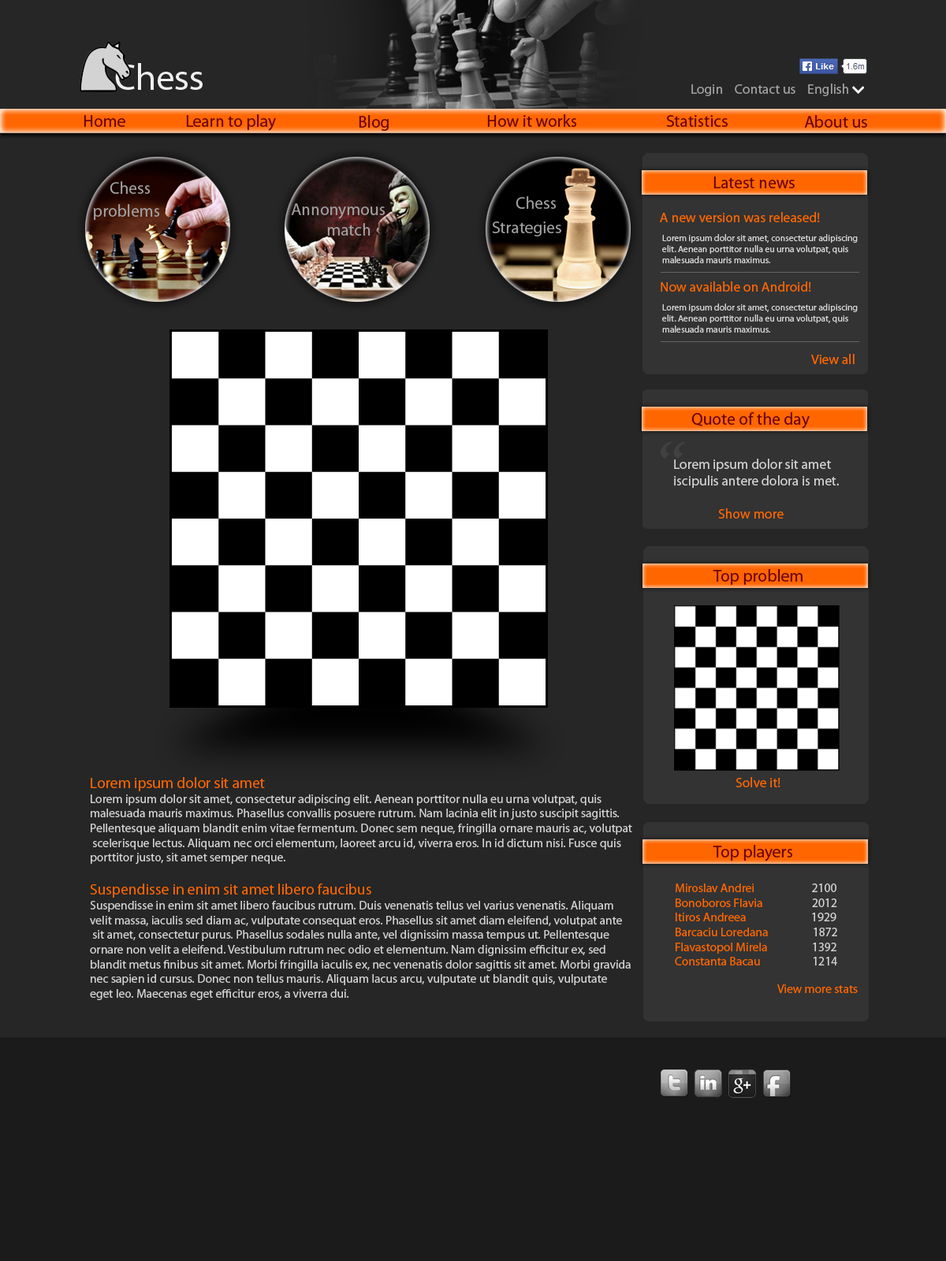
<style>
.page{position:relative;width:946px;height:1261px;background:#262626}
.page>*{position:absolute;margin:0}
.t1{font:36.8px "MyriadPro-Regular";color:#efefef}
.t2{font:13.8px "MyriadPro-Regular";color:#a2a2a2}
.t3{font:16.9px "MyriadPro-Regular";color:#69000a}
.t4{font:16.9px "MyriadPro-Regular";color:#a2a2a2}
.t5{font:13.8px "MyriadPro-Regular";color:#ff6600}
.t6{font:9.2px "MyriadPro-Regular";color:#d3d3d3}
.t7{font:55.2px "ScriptMTBold";color:#414141}
.t8{font:13.8px "MyriadPro-Regular";color:#d3d3d3}
.t9{font:12.3px "MyriadPro-Regular";color:#d3d3d3}
.t10{font:15.3px "MyriadPro-Regular";color:#ff6600}
.t11{font:12.3px "MyriadPro-Regular";color:#ff6600}
</style>
<div class="page">
<p class="t1" style="left:115px;top:63px;width:88px;height:27px">Chess</p>
<p class="t2" style="left:691px;top:84px;width:157px;height:12px">Login    Contact us    English</p>
<p class="t3" style="left:84px;top:115px;width:41px;height:12px">Home</p>
<p class="t3" style="left:186px;top:114px;width:90px;height:17px">Learn to play</p>
<p class="t3" style="left:359px;top:115px;width:30px;height:16px">Blog</p>
<p class="t3" style="left:487px;top:114px;width:90px;height:13px">How it works</p>
<p class="t3" style="left:666px;top:115px;width:61px;height:12px">Statistics</p>
<p class="t3" style="left:804px;top:115px;width:63px;height:13px">About us</p>
<p class="t4" style="left:110px;top:181px;width:41px;height:13px">Chess</p>
<p class="t3" style="left:713px;top:177px;width:81px;height:11px">Latest news</p>
<p class="t4" style="left:515px;top:196px;width:41px;height:13px">Chess</p>
<p class="t4" style="left:93px;top:204px;width:67px;height:16px">problems</p>
<p class="t4" style="left:291px;top:203px;width:94px;height:33px">Annonymous <br>          match</p>
<p class="t4" style="left:492px;top:221px;width:69px;height:15px">Strategies</p>
<p class="t5" style="left:660px;top:212px;width:160px;height:10px">A new version was released!</p>
<p class="t6" style="left:662px;top:234px;width:195px;height:29px">Lorem ipsum dolor sit amet, consectetur adipiscing <br>elit. Aenean porttitor nulla eu urna volutpat, quis <br>malesuada mauris maximus.</p>
<p class="t5" style="left:660px;top:281px;width:151px;height:11px">Now available on Android!</p>
<p class="t6" style="left:662px;top:303px;width:195px;height:30px">Lorem ipsum dolor sit amet, consectetur adipiscing <br>elit. Aenean porttitor nulla eu urna volutpat, quis <br>malesuada mauris maximus.</p>
<p class="t5" style="left:811px;top:354px;width:43px;height:10px">View all</p>
<p class="t3" style="left:691px;top:412px;width:118px;height:17px">Quote of the day</p>
<p class="t7" style="left:660px;top:441px;width:25px;height:18px">“</p>
<p class="t8" style="left:674px;top:459px;width:165px;height:29px">Lorem ipsum dolor sit amet<br>iscipulis antere dolora is met.</p>
<p class="t5" style="left:718px;top:508px;width:65px;height:11px">Show more</p>
<p class="t3" style="left:712px;top:569px;width:90px;height:16px">Top problem</p>
<p class="t9" style="left:90px;top:777px;width:542px;height:223px"><span class="t10">Lorem ipsum dolor sit amet<br></span>Lorem ipsum dolor sit amet, consectetur adipiscing elit. Aenean porttitor nulla eu urna volutpat, quis <br>malesuada mauris maximus. Phasellus convallis posuere rutrum. Nam lacinia elit in justo suscipit sagittis. <br>Pellentesque aliquam blandit enim vitae fermentum. Donec sem neque, fringilla ornare mauris ac, volutpat<br> scelerisque lectus. Aliquam nec orci elementum, laoreet arcu id, viverra eros. In id dictum nisi. Fusce quis <br>porttitor justo, sit amet semper neque.<br><br><span class="t10">Suspendisse in enim sit amet libero faucibus<br></span>Suspendisse in enim sit amet libero faucibus rutrum. Duis venenatis tellus vel varius venenatis. Aliquam <br>velit massa, iaculis sed diam ac, vulputate consequat eros. Phasellus sit amet diam eleifend, volutpat ante<br> sit amet, consectetur purus. Phasellus sodales nulla ante, vel dignissim massa tempus ut. Pellentesque <br>ornare non velit a eleifend. Vestibulum rutrum nec odio et elementum. Nam dignissim efficitur ex, sed <br>blandit metus finibus sit amet. Morbi fringilla iaculis ex, nec venenatis dolor sagittis sit amet. Morbi gravida <br>nec sapien id cursus. Donec non tellus mauris. Aliquam lacus arcu, vulputate ut blandit quis, vulputate <br>eget leo. Maecenas eget efficitur eros, a viverra dui.</p>
<p class="t5" style="left:735px;top:777px;width:45px;height:10px">Solve it!</p>
<p class="t3" style="left:712px;top:845px;width:81px;height:16px">Top players</p>
<p class="t11" style="left:675px;top:883px;width:162px;height:82px">Miroslav Andrei                     <span class="t9"> 2100<br></span>Bonoboros Flavia                   <span class="t9">2012<br></span>Itiros Andreea                         <span class="t9">1929<br></span>Barcaciu Loredana                 <span class="t9">1872<br></span>Flavastopol Mirela                 <span class="t9">1392<br></span>Constanta Bacau                    <span class="t9">1214</span></p>
<p class="t11" style="left:777px;top:984px;width:80px;height:9px">View more stats</p>
</div>
